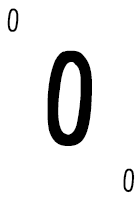
<style>
.page{position:relative;width:140px;height:200px;background:#ffffff}
.page>*{position:absolute;margin:0}
.t1{font:28.7px "CardenioModern-Reg";letter-spacing:-0.1em;color:#000000;text-transform:uppercase;font-weight:bold;scale:0.87 1}
.t2{font:115px "CardenioModern-Bold";letter-spacing:-0.1em;color:#000000;text-transform:uppercase;font-weight:bold;scale:0.87 1}
</style>
<div class="page">
<p class="t1" style="left:7px;top:8px;width:12px;height:24px">0</p>
<p class="t2" style="left:47px;top:50px;width:45px;height:96px">0</p>
<p class="t1" style="left:123px;top:168px;width:12px;height:25px;rotate:180deg">0</p>
</div>
